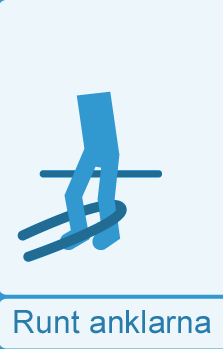
<style>
.page{position:relative;width:223px;height:349px;background:#ecf6fb}
.page>*{position:absolute;margin:0}
.t1{font:32px "ArialMT";color:#277cab}
</style>
<div class="page">
<p class="t1" style="left:14px;top:310px;width:197px;height:24px">Runt anklarna</p>
</div>
